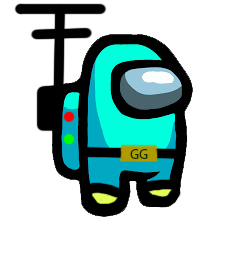
<style>
.page{position:relative;width:225px;height:256px;background:#ffffff}
.page>*{position:absolute;margin:0}
.t1{font:14px "MyriadPro-Regular";color:#023100}
</style>
<div class="page">
<p class="t1" style="left:130px;top:149px;width:18px;height:10px">GG</p>
</div>
